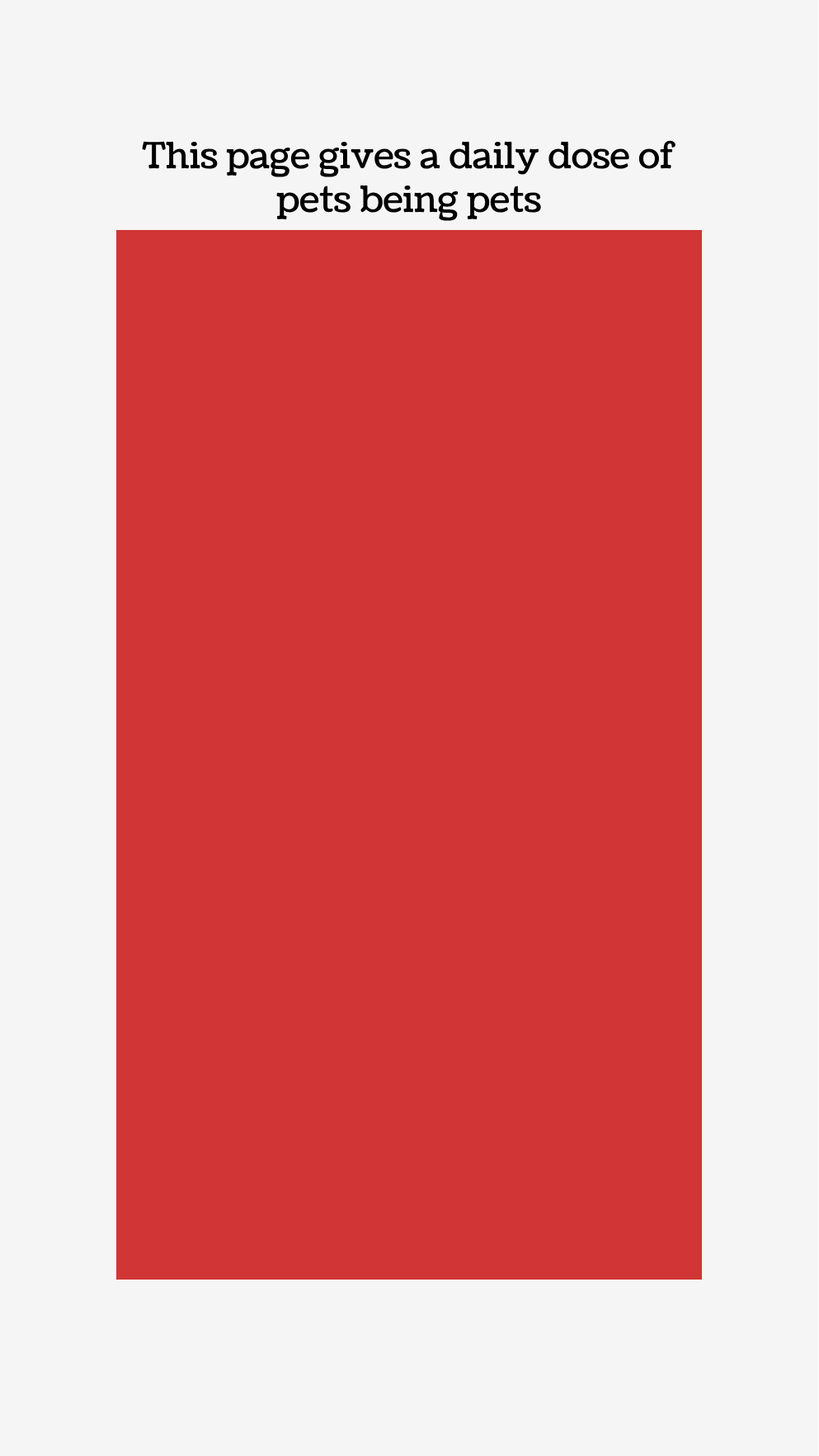
<style>
.page{position:relative;width:819px;height:1456px;background:#d13535}
.page>*{position:absolute;margin:0}
.t1{font:36.3px "Coustard-Regular";color:#000000}
</style>
<div class="page">
<p class="t1" style="left:142px;top:140px;width:533px;height:81px;text-align:center">This page gives a daily dose of<br>pets being pets</p>
</div>
